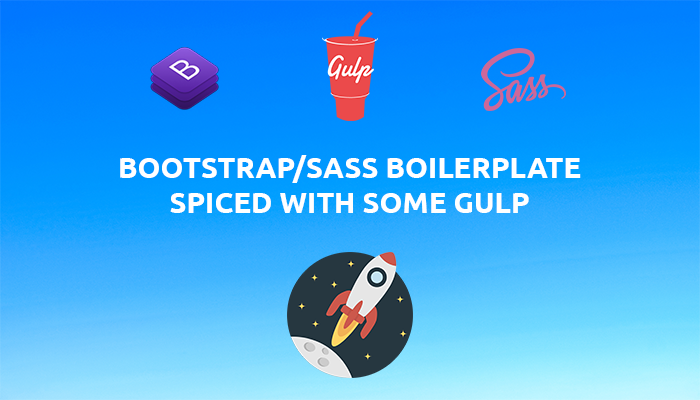
<style>
.page{position:relative;width:700px;height:400px}
.page>*{position:absolute;margin:0}
.t1{font:29.2px "Ubuntu-Bold";color:#ffffff}
</style>
<div class="page">
<p class="t1" style="left:120px;top:155px;width:461px;height:58px;text-align:center">BOOTSTRAP/SASS BOILERPLATE<br>SPICED WITH SOME GULP</p>
</div>
